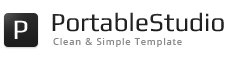
<style>
.page{position:relative;width:250px;height:60px;background:#ffffff}
.page>*{position:absolute;margin:0}
.t1{font:26px "Play";color:#252525}
.t2{font:28px "Play";color:#ffffff}
.t3{font:10px "DroidSans";letter-spacing:0.075em;color:#898989}
</style>
<div class="page">
<p class="t1" style="left:52px;top:12px;width:172px;height:20px">PortableStudio</p>
<p class="t2" style="left:14px;top:20px;width:14px;height:19px">P</p>
<p class="t3" style="left:53px;top:38px;width:129px;height:9px">Clean &amp; Simple Template</p>
</div>
